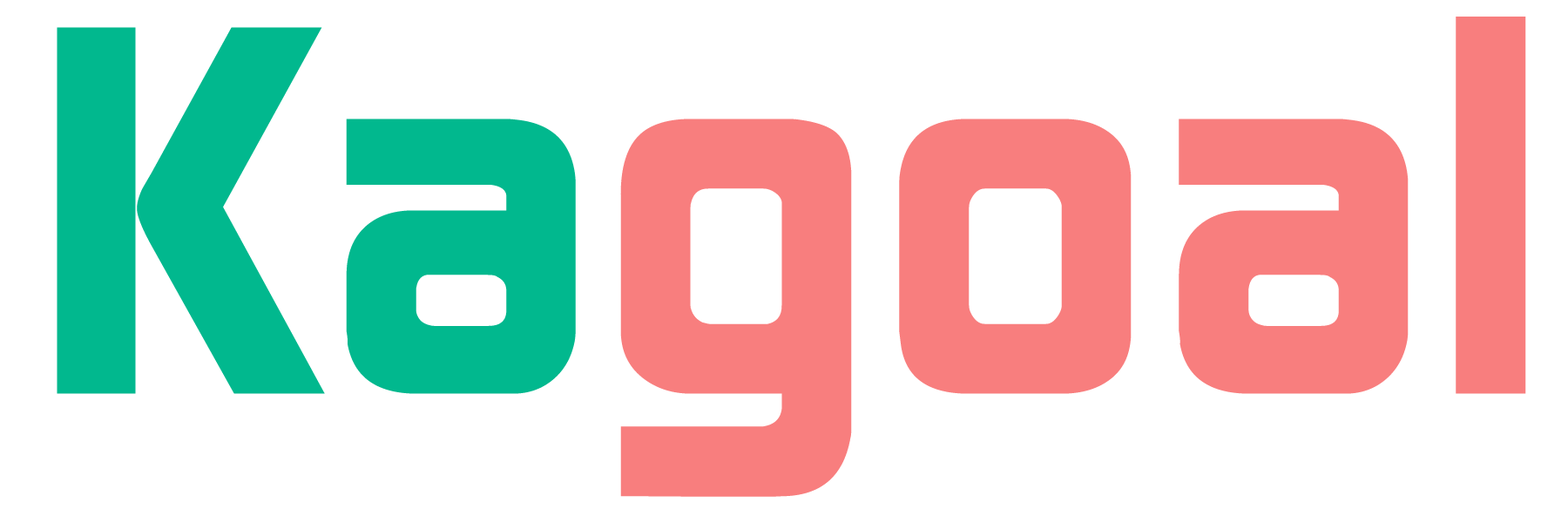
<style>
.page{position:relative;width:1568px;height:523px;background:#ffffff}
.page>*{position:absolute;margin:0}
.t1{font:522.7px "ContinuumBold";color:#f87e7e}
.t2{font:522.7px "ContinuumBold";color:#01b88e}
</style>
<div class="page">
<p class="t1" style="left:620px;top:17px;width:906px;height:480px">goal</p>
<p class="t2" style="left:57px;top:27px;width:519px;height:367px">Ka</p>
</div>
